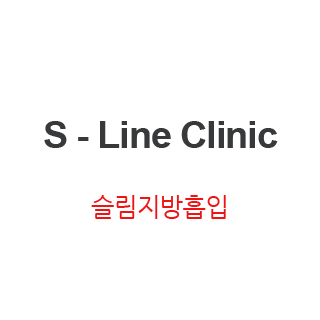
<style>
.page{position:relative;width:320px;height:320px;background:#ffffff}
.page>*{position:absolute;margin:0}
.t1{font:37.5px/33.3px "Arial-BoldMT";letter-spacing:-0.025em;color:#37393a}
.t2{font:37.5px/41.7px "Arial-BoldMT";letter-spacing:-0.025em;color:#37393a}
.t3{font:25px/33.3px "NanumGothic";letter-spacing:-0.025em;color:#ee1414}
</style>
<div class="page">
<p class="t1" style="left:44px;top:121px;width:234px;height:98px;text-align:center"><span class="t2">S </span>- Line Clinic<br><br><span class="t3">슬림지방흡입</span></p>
</div>
